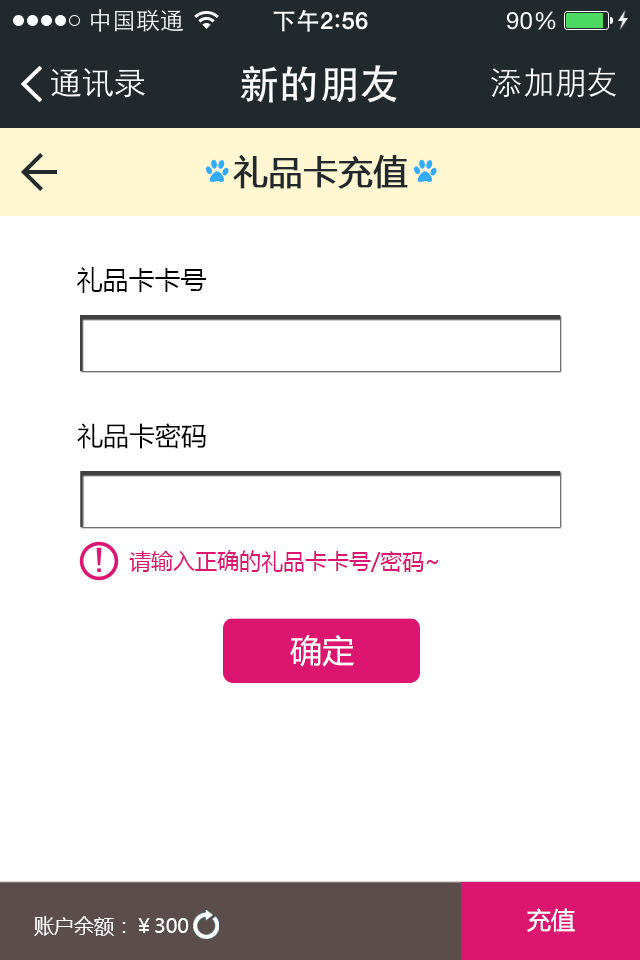
<style>
.page{position:relative;width:640px;height:960px;background:#ffffff}
.page>*{position:absolute;margin:0}
.t1{font:34px "MicrosoftYaHei";color:#22292c;font-weight:bold}
.t2{font:26px "MicrosoftYaHei";color:#000000}
.t3{font:22px "MicrosoftYaHei";color:#dc1570}
.t4{font:32.4px "MicrosoftYaHei";color:#ffffff}
.t5{font:20px "MicrosoftYaHei";color:#ffffff}
.t6{font:20px "MicrosoftYaHei";color:#fffefe}
.t7{font:24px "MicrosoftYaHei";color:#ffffff}
</style>
<div class="page">
<p class="t1" style="left:233px;top:155px;width:175px;height:34px">礼品卡充值</p>
<p class="t2" style="left:77px;top:267px;width:129px;height:26px">礼品卡卡号</p>
<p class="t2" style="left:77px;top:423px;width:129px;height:26px">礼品卡密码</p>
<p class="t3" style="left:129px;top:550px;width:310px;height:23px">请输入正确的礼品卡卡号/密码~</p>
<p class="t4" style="left:290px;top:635px;width:64px;height:32px">确定</p>
<p class="t5" style="left:34px;top:916px;width:155px;height:20px">账户余额：<span class="t6">￥</span>300</p>
<p class="t7" style="left:527px;top:908px;width:48px;height:24px">充值</p>
</div>
